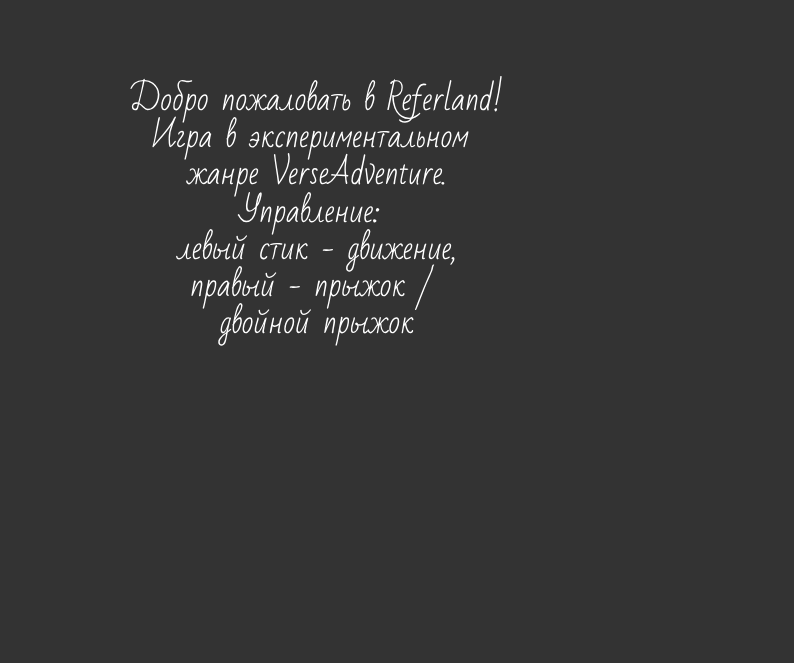
<style>
.page{position:relative;width:794px;height:663px;background:#333333}
.page>*{position:absolute;margin:0}
.t1{font:31px "BadScript-Regular";color:#ffffff}
</style>
<div class="page">
<p class="t1" style="left:130px;top:75px;width:372px;height:271px;text-align:center">Добро пожаловать в Referland!<br>Игра в экспериментальном <br>жанре VerseAdventure.<br>Управление: <br>левый стик - движение,<br>правый - прыжок / <br>двойной прыжок</p>
</div>
